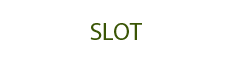
<style>
.page{position:relative;width:230px;height:60px;background:#ffffff}
.page>*{position:absolute;margin:0}
.t1{font:24.7px "MyriadPro-Regular";color:#3a5505}
</style>
<div class="page">
<p class="t1" style="left:90px;top:23px;width:52px;height:17px">SLOT</p>
</div>
